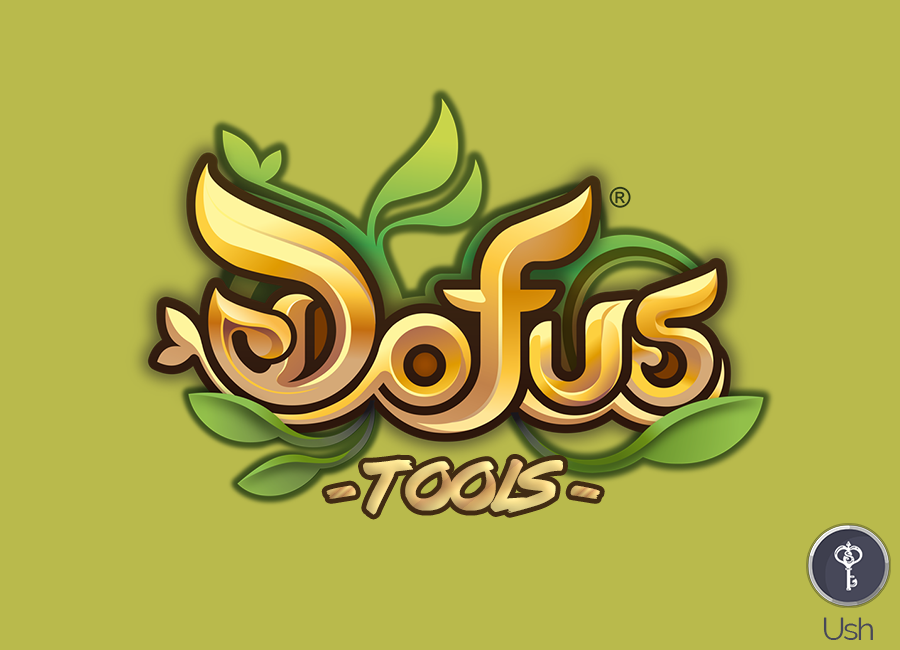
<style>
.page{position:relative;width:900px;height:650px;background:#b9ba4c}
.page>*{position:absolute;margin:0}
.t1{font:60px "lazer84";letter-spacing:-0.06em}
.t2{font:106.2px "lazer84";letter-spacing:-0.06em}
.t3{font:106.3px "lazer84";letter-spacing:-0.06em}
.t4{font:31.5px "Raleway";letter-spacing:-0.06em;color:#474859}
</style>
<div class="page">
<p class="t1" style="left:363px;top:459px;width:200px;height:56px">Tools</p>
<p class="t2" style="left:326px;top:485px;width:30px;height:14px;rotate:52deg">,</p>
<p class="t3" style="left:570px;top:485px;width:30px;height:14px;rotate:128deg">,</p>
<p class="t4" style="left:823px;top:617px;width:50px;height:23px">Ush</p>
</div>
